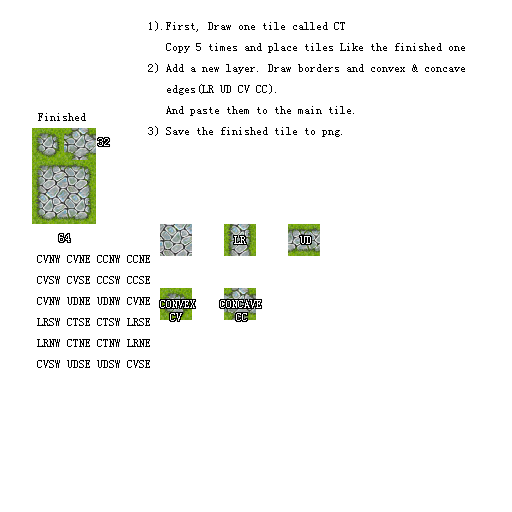
<style>
.page{position:relative;width:512px;height:512px;background:#ffffff}
.page>*{position:absolute;margin:0}
.t1{font:12px "SimSun";color:#000000}
.t2{font:12px "SimSun";color:#ffffff}
</style>
<div class="page">
<p class="t1" style="left:148px;top:21px;width:317px;height:116px">1).First, Draw one tile called CT<br>   Copy 5 times and place tiles Like the finished one<br>2) Add a new layer. Draw borders and convex &amp; concave <br>   edges(LR UD CV CC).<br>   And paste them to the main tile.<br>3) Save the finished tile to png.</p>
<p class="t1" style="left:38px;top:113px;width:48px;height:8px">Finished</p>
<p class="t2" style="left:98px;top:138px;width:11px;height:8px">32</p>
<p class="t2" style="left:59px;top:234px;width:11px;height:8px">64</p>
<p class="t1" style="left:37px;top:255px;width:113px;height:113px">CVNW CVNE CCNW CCNE<br>CVSW CVSE CCSW CCSE<br>CVNW UDNE UDNW CVNE<br>LRSW CTSE CTSW LRSE<br>LRNW CTNE CTNW LRNE<br>CVSW UDSE UDSW CVSE</p>
<p class="t2" style="left:160px;top:300px;width:101px;height:8px">CONVEX    CONCAVE</p>
</div>
